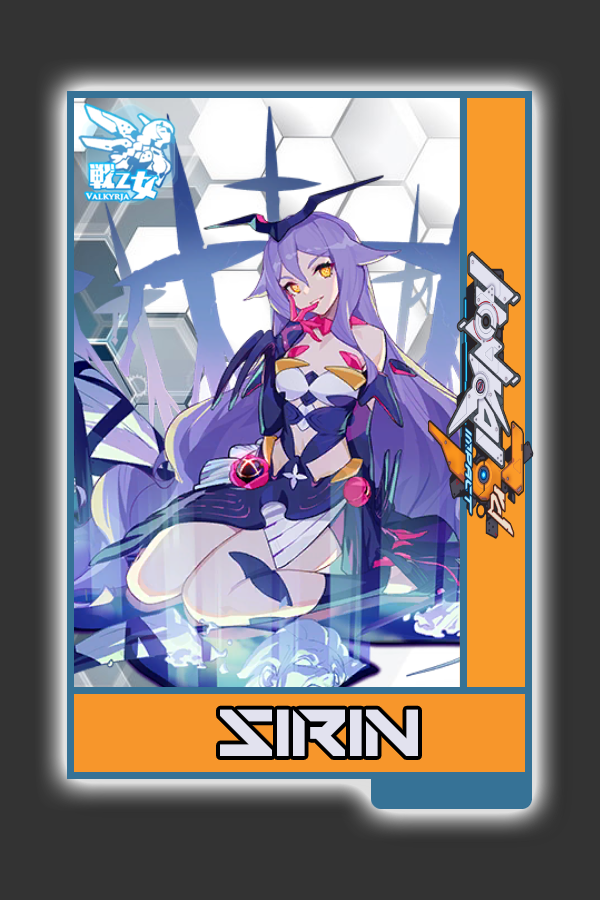
<style>
.page{position:relative;width:600px;height:900px;background:#333333}
.page>*{position:absolute;margin:0}
.t1{font:46.2px "Mechsuit";color:#e2e2ef}
</style>
<div class="page">
<p class="t1" style="left:220px;top:709px;width:198px;height:47px">sirin</p>
</div>
